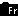
<style>
.page{position:relative;width:18px;height:18px;background:#000000}
.page>*{position:absolute;margin:0}
.t1{font:9px "LucidaGrande";color:#ffffff}
</style>
<div class="page">
<p class="t1" style="left:9px;top:7px;width:8px;height:7px">Fr</p>
</div>
